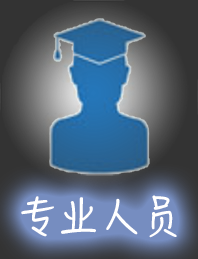
<style>
.page{position:relative;width:198px;height:259px}
.page>*{position:absolute;margin:0}
.t1{font:40.3px "HanziPenSC-W5";color:#ffffff}
</style>
<div class="page">
<p class="t1" style="left:21px;top:195px;width:156px;height:43px">专业人员</p>
</div>
